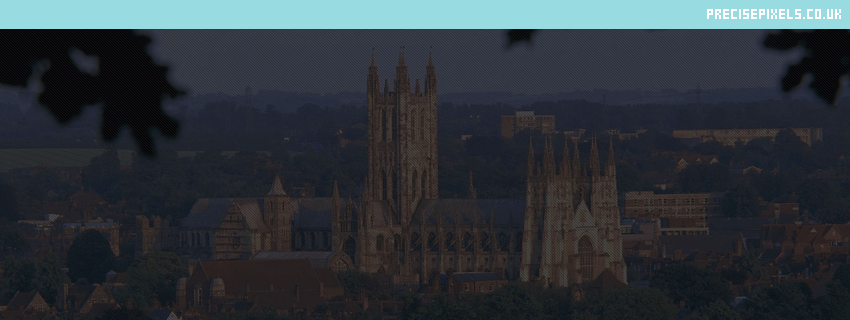
<style>
.page{position:relative;width:850px;height:320px}
.page>*{position:absolute;margin:0}
.t1{font:20px "wendy";color:#ffffff}
</style>
<div class="page">
<p class="t1" style="left:707px;top:9px;width:134px;height:10px">precisepixels.co.uk</p>
</div>
